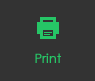
<style>
.page{position:relative;width:95px;height:81px;background:#333333}
.page>*{position:absolute;margin:0}
.t1{font:12.5px "CenturyGothic";color:#26c566;font-weight:bold}
</style>
<div class="page">
<p class="t1" style="left:35px;top:53px;width:26px;height:10px">Print</p>
</div>
